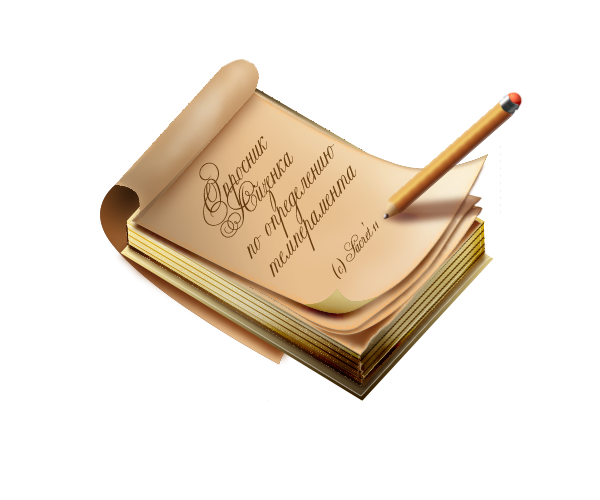
<style>
.page{position:relative;width:600px;height:500px;background:#ffffff}
.page>*{position:absolute;margin:0}
.t1{font:24px "EkaterinaVelikayaOne";color:#704f1c}
.t2{font:14px "EkaterinaVelikayaOne";color:#704f1c}
</style>
<div class="page">
<p class="t1" style="left:199px;top:136px;width:180px;height:143px;rotate:-51deg">Опросник <br> Айзенка <br> по определению <br> темперамента<br><span class="t2">         <br><br>         (c) Sacret’11</span></p>
</div>
